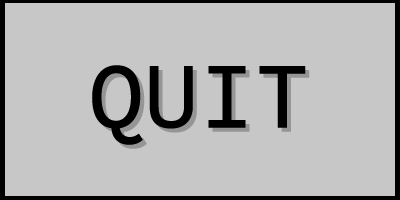
<style>
.page{position:relative;width:400px;height:200px;background:#c7c7c7}
.page>*{position:absolute;margin:0}
.t1{font:96px "Consolas";color:#000000;font-weight:bold}
.t2{font:96px "Consolas";font-weight:bold}
</style>
<div class="page">
<p class="t1" style="left:92px;top:65px;width:214px;height:80px">QUIT</p>
<p class="t2" style="left:96px;top:69px;width:214px;height:80px">QUIT</p>
</div>
